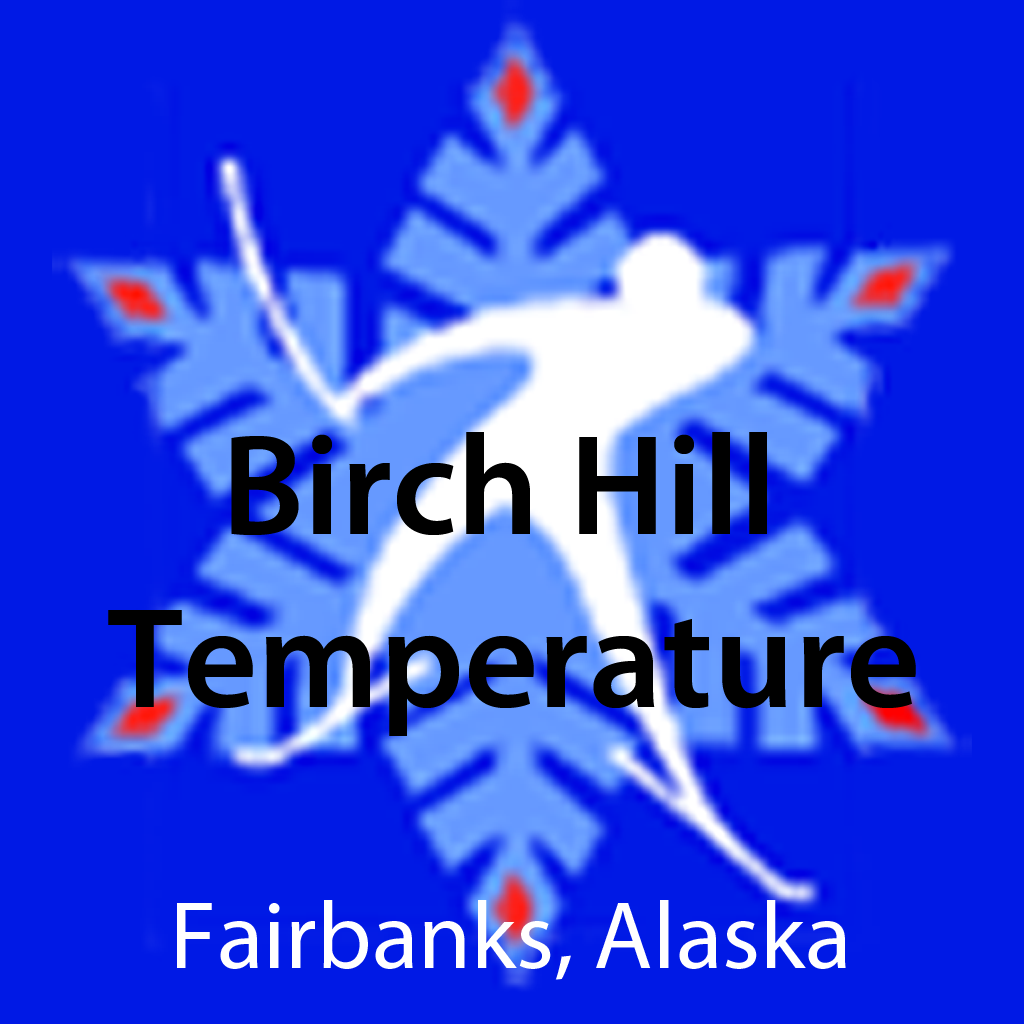
<style>
.page{position:relative;width:1024px;height:1024px;background:#0019e5}
.page>*{position:absolute;margin:0}
.t1{font:144px "MyriadPro-Semibold";color:#000000}
.t2{font:96px "MyriadPro-Regular";color:#ffffff}
</style>
<div class="page">
<p class="t1" style="left:108px;top:432px;width:808px;height:304px;text-align:center">Birch Hill <br>Temperature</p>
<p class="t2" style="left:177px;top:900px;width:669px;height:80px">Fairbanks, Alaska</p>
</div>
